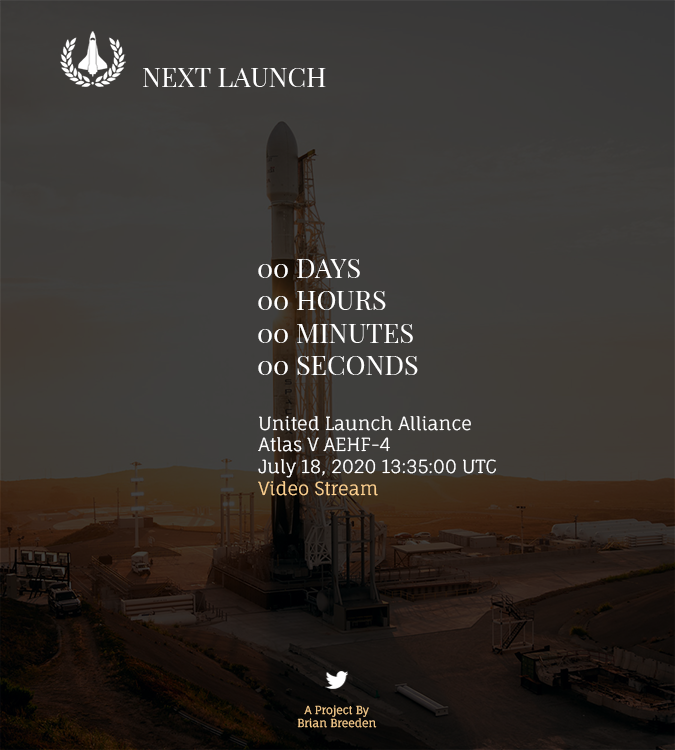
<style>
.page{position:relative;width:675px;height:750px}
.page>*{position:absolute;margin:0}
.t1{font:27px "PlayfairDisplay-Regular";color:#ffffff}
.t2{font:18px "FaunaOne";color:#ffffff}
.t3{font:18px "FaunaOne";color:#fed190}
.t4{font:11px "FaunaOne";color:#fed190}
</style>
<div class="page">
<p class="t1" style="left:143px;top:68px;width:183px;height:19px">NEXT LAUNCH</p>
<p class="t1" style="left:258px;top:259px;width:160px;height:116px">00 DAYS<br>00 HOURS<br>00 MINUTES<br>00 SECONDS</p>
<p class="t2" style="left:258px;top:416px;width:238px;height:80px">United Launch Alliance<br>Atlas V AEHF-4<br>July 18, 2020 13:35:00 UTC<br><span class="t3">Video Stream</span></p>
<p class="t4" style="left:297px;top:705px;width:80px;height:23px;text-align:center">A Project By<br>Brian Breeden</p>
</div>
